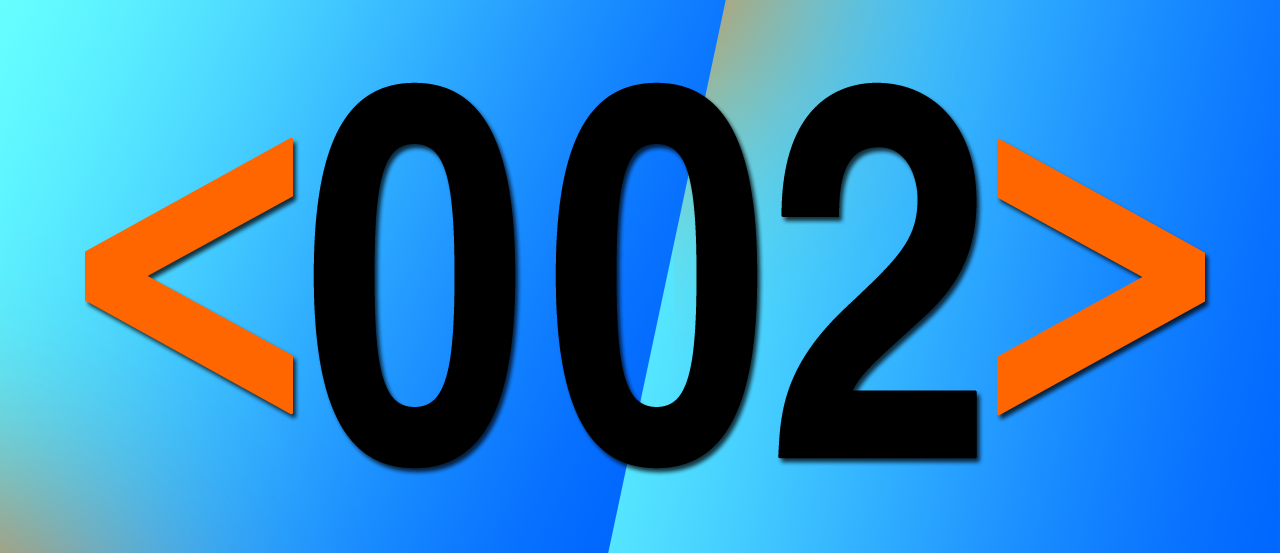
<style>
.page{position:relative;width:1280px;height:553px}
.page>*{position:absolute;margin:0}
.t1{font:525.5px "HelveticaLTStd-Bold";letter-spacing:-0.025em;color:#000000;font-weight:bold;scale:0.77 1}
.t2{font:525.5px "HelveticaLTStd-Bold";letter-spacing:-0.025em;color:#ff6600;font-weight:bold;scale:0.77 1}
</style>
<div class="page">
<p class="t1" style="left:313px;top:82px;width:664px;height:387px">002</p>
<p class="t2" style="left:85px;top:137px;width:208px;height:278px">&lt;</p>
<p class="t2" style="left:997px;top:138px;width:208px;height:278px;rotate:180deg">&lt;</p>
</div>
